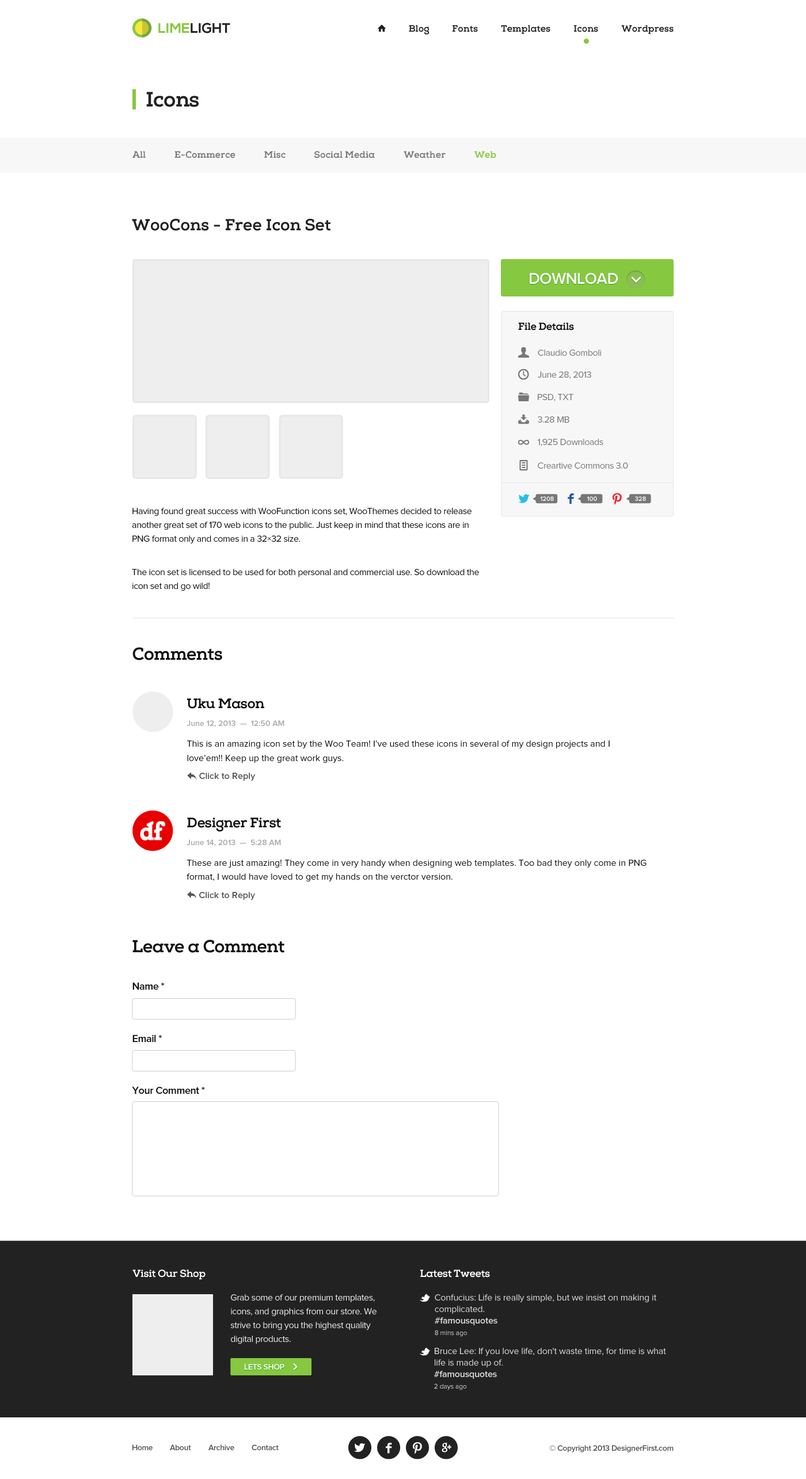
<style>
.page{position:relative;width:806px;height:1479px;background:#ffffff}
.page>*{position:absolute;margin:0}
.t1{font:13.8px "NexaBold";color:#222222;text-transform:uppercase}
.t2{font:13.8px "NexaBold";color:#86c840;text-transform:uppercase}
.t3{font:9.2px "NexaSlab-xBold";color:#222222}
.t4{font:20.7px "NexaSlab-xBold";letter-spacing:-0.025em;color:#222222}
.t5{font:9.2px "NexaSlab-xBold";color:#777777}
.t6{font:9.2px "NexaSlab-xBold";color:#86c840}
.t7{font:16.1px "NexaSlab-xBold";color:#222222}
.t8{font:16.1px "ProximaNova-Semibold";letter-spacing:-0.025em;color:#ffffff;text-transform:uppercase}
.t9{font:10.4px "NexaSlab-xBold";letter-spacing:-0.025em;color:#111111}
.t10{font:9.2px "ProximaNova-Regular";letter-spacing:-0.025em;color:#777777}
.t11{font:6.3px "ProximaNova-Semibold";color:#ffffff}
.t12{font:9.2px/13.8px "ProximaNova-Regular";letter-spacing:-0.025em;color:#111111}
.t13{font:17.3px "NexaSlab-xBold";letter-spacing:-0.025em;color:#111111}
.t14{font:13.8px "NexaSlab-xBold";letter-spacing:-0.025em;color:#111111}
.t15{font:8.1px "ProximaNova-Semibold";color:#aaaaaa}
.t16{font:9.2px/11.5px "ProximaNova-Regular";color:#111111}
.t17{font:9.2px "ProximaNova-Semibold";color:#555555}
.t18{font:10.4px "ProximaNova-Semibold";letter-spacing:-0.025em;color:#111111}
.t19{font:10.4px "NexaSlab-xBold";letter-spacing:-0.025em;color:#ffffff}
.t20{font:9.2px/13.8px "ProximaNova-Regular";letter-spacing:-0.025em;color:#eeeeee}
.t21{font:9.2px/11.5px "ProximaNova-Regular";letter-spacing:-0.01em;color:#dcdcdc}
.t22{font:9.2px/11.5px "ProximaNova-Semibold";letter-spacing:-0.01em;color:#dcdcdc}
.t23{font:6.9px/11.5px "ProximaNova-Regular";letter-spacing:-0.01em;color:#dcdcdc}
.t24{font:8.1px "ProximaNova-Semibold";letter-spacing:-0.025em;color:#ffffff;text-transform:uppercase}
.t25{font:8.1px "ProximaNova-Semibold";letter-spacing:-0.025em;color:#555555}
</style>
<div class="page">
<p class="t1" style="left:158px;top:22px;width:72px;height:11px"><span class="t2">Lime</span>Light</p>
<p class="t3" style="left:409px;top:25px;width:21px;height:10px">Blog</p>
<p class="t3" style="left:453px;top:25px;width:25px;height:7px">Fonts</p>
<p class="t3" style="left:501px;top:25px;width:49px;height:9px">Templates</p>
<p class="t3" style="left:574px;top:25px;width:24px;height:7px">Icons</p>
<p class="t3" style="left:621px;top:25px;width:53px;height:9px">Wordpress</p>
<p class="t4" style="left:146px;top:92px;width:53px;height:15px">Icons</p>
<p class="t5" style="left:132px;top:151px;width:14px;height:7px">All</p>
<p class="t5" style="left:174px;top:151px;width:62px;height:7px">E-Commerce</p>
<p class="t5" style="left:264px;top:151px;width:22px;height:7px">Misc</p>
<p class="t5" style="left:314px;top:151px;width:61px;height:7px">Social Media</p>
<p class="t5" style="left:404px;top:151px;width:42px;height:7px">Weather</p>
<p class="t6" style="left:474px;top:151px;width:22px;height:7px">Web</p>
<p class="t7" style="left:132px;top:219px;width:199px;height:12px">WooCons - Free Icon Set</p>
<p class="t8" style="left:530px;top:273px;width:88px;height:11px">Download</p>
<p class="t9" style="left:518px;top:322px;width:56px;height:9px">File Details</p>
<p class="t10" style="left:538px;top:350px;width:63px;height:6px">Claudio Gomboli</p>
<p class="t10" style="left:538px;top:371px;width:53px;height:8px">June 28, 2013</p>
<p class="t10" style="left:538px;top:394px;width:35px;height:7px">PSD, TXT</p>
<p class="t10" style="left:538px;top:416px;width:31px;height:7px">3.28 MB</p>
<p class="t10" style="left:537px;top:439px;width:66px;height:7px">1,925 Downloads</p>
<p class="t10" style="left:538px;top:462px;width:90px;height:7px">Creartive Commons 3.0</p>
<p class="t11" style="left:540px;top:496px;width:14px;height:5px">1208</p>
<p class="t11" style="left:587px;top:496px;width:10px;height:5px">100</p>
<p class="t11" style="left:635px;top:496px;width:11px;height:5px">328</p>
<p class="t12" style="left:132px;top:508px;width:347px;height:83px">Having found great success with WooFunction icons set, WooThemes decided to release another great set of 170 web icons to the public. Just keep in mind that these icons are in PNG format only and comes in a 32×32 size.<br><br>The icon set is licensed to be used for both personal and commercial use. So download the icon set and go wild!</p>
<p class="t13" style="left:132px;top:647px;width:90px;height:13px">Comments</p>
<p class="t14" style="left:187px;top:698px;width:77px;height:11px">Uku Mason</p>
<p class="t15" style="left:187px;top:720px;width:97px;height:7px">June 12, 2013  —  12:50 AM</p>
<p class="t16" style="left:187px;top:740px;width:423px;height:23px">This is an amazing icon set by the Woo Team! I’ve used these icons in several of my design projects and I <br>love’em!! Keep up the great work guys.</p>
<p class="t17" style="left:199px;top:773px;width:57px;height:8px">Click to Reply</p>
<p class="t14" style="left:187px;top:818px;width:94px;height:14px">Designer First</p>
<p class="t15" style="left:187px;top:840px;width:94px;height:6px">June 14, 2013  —  5:28 AM</p>
<p class="t16" style="left:187px;top:860px;width:460px;height:22px">These are just amazing! They come in very handy when designing web templates. Too bad they only come in PNG <br>format, I would have loved to get my hands on the verctor version.</p>
<p class="t17" style="left:199px;top:892px;width:56px;height:8px">Click to Reply</p>
<p class="t13" style="left:132px;top:940px;width:152px;height:13px">Leave a Comment</p>
<p class="t18" style="left:132px;top:982px;width:33px;height:8px">Name *</p>
<p class="t18" style="left:132px;top:1035px;width:30px;height:7px">Email *</p>
<p class="t18" style="left:132px;top:1087px;width:73px;height:7px">Your Comment *</p>
<p class="t19" style="left:132px;top:1270px;width:74px;height:10px">Visit Our Shop</p>
<p class="t19" style="left:420px;top:1270px;width:70px;height:8px">Latest Tweets</p>
<p class="t20" style="left:230px;top:1294px;width:147px;height:50px">Grab some of our premium templates, icons, and graphics from our store. We strive to bring you the highest quality digital products.</p>
<p class="t21" style="left:435px;top:1294px;width:222px;height:43px">Confucius: Life is really simple, but we insist on making it complicated. <br><span class="t22">#famousquotes<br></span><span class="t23">8 mins ago</span></p>
<p class="t21" style="left:434px;top:1348px;width:232px;height:43px">Bruce Lee: If you love life, don't waste time, for time is what life is made up of. <br><span class="t22">#famousquotes<br></span><span class="t23">2 days ago</span></p>
<p class="t24" style="left:244px;top:1364px;width:40px;height:6px">Lets Shop</p>
<p class="t25" style="left:132px;top:1445px;width:21px;height:5px">Home</p>
<p class="t25" style="left:170px;top:1445px;width:21px;height:5px">About</p>
<p class="t25" style="left:208px;top:1445px;width:26px;height:5px">Archive</p>
<p class="t25" style="left:252px;top:1445px;width:27px;height:5px">Contact</p>
<p class="t25" style="left:549px;top:1445px;width:125px;height:8px">© Copyright 2013 DesignerFirst.com</p>
</div>
